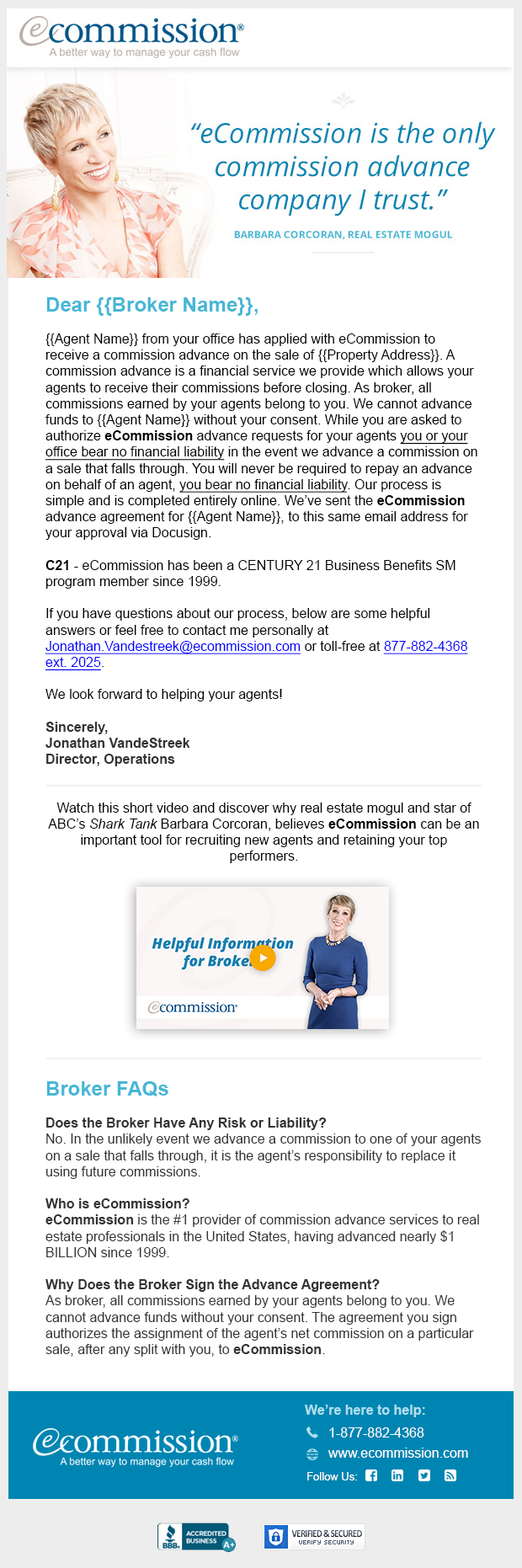
<style>
.page{position:relative;width:522px;height:1568px;background:#ffffff}
.page>*{position:absolute;margin:0}
.t1{font:13.5px "ArialMT";color:#000000}
.t2{font:20.2px "Arial-BoldMT";color:#46b7d5}
.t3{font:13.5px "Arial-BoldMT";color:#000000}
.t4{font:13.5px "ArialMT";color:#000000;text-decoration:underline}
.t5{font:13.5px "ArialMT";color:#0000ff;text-decoration:underline}
.t6{font:13.5px "Arial-BoldMT";color:#333333}
.t7{font:13.5px "Arial-ItalicMT";color:#000000}
.t8{font:13.5px "ArialMT";color:#333333}
.t9{font:13.5px "Arial-BoldMT";color:#abe0ed}
.t10{font:13.5px/20.2px "ArialMT";color:#ffffff}
.t11{font:10.9px "ArialMT";color:#ffffff}
</style>
<div class="page">
<p class="t1" style="left:45px;top:297px;width:436px;height:1060px"><span class="t2">Dear {{Broker Name}}, <br></span><br>{{Agent Name}} from your office has applied with eCommission to receive a commission advance on the sale of {{Property Address}}. A commission advance is a financial service we provide which allows your agents to receive their commissions before closing. As broker, all commissions earned by your agents belong to you. We cannot advance funds to {{Agent Name}} without your consent. While you are asked to authorize <span class="t3">eCommission</span> advance requests for your agents <span class="t4">you or your office bear no financial liability</span> in the event we advance a commission on a sale that falls through. You will never be required to repay an advance on behalf of an agent, <span class="t4">you bear no financial liability</span>. Our process is simple and is completed entirely online. We’ve sent the <span class="t3">eCommission</span> advance agreement for {{Agent Name}}, to this same email address for your approval via Docusign.<br> <br><span class="t3">C21</span> - eCommission has been a CENTURY 21 Business Benefits SM program member since 1999.<br><br>If you have questions about our process, below are some helpful answers or feel free to contact me personally at <span class="t5">Jonathan.Vandestreek@ecommission.com</span> or toll-free at <span class="t5">877-882-4368 ext. 2025</span>.<br><br>We look forward to helping your agents!<br> <br><span class="t6">Sincerely,<br>Jonathan VandeStreek<br>Director, Operations<br></span><br><br>Watch this short video and discover why real estate mogul and star of ABC’s <span class="t7">Shark Tank</span> Barbara Corcoran, believes <span class="t3">eCommission</span> can be an important tool for recruiting new agents and retaining your top performers.<br><br><br><br><br><br><br><br><br><br><br><br><br> <br><span class="t2">Broker FAQs <br> <br></span><span class="t6">Does the Broker Have Any Risk or Liability?<br></span><span class="t8">No. In the unlikely event we advance a commission to one of your agents on a sale that falls through, it is the agent’s responsibility to replace it using future commissions. <br> <br></span><span class="t6">Who is eCommission?<br>eCommission</span><span class="t8"> is the #1 provider of commission advance services to real estate professionals in the United States, having advanced nearly $1 BILLION since 1999. <br><br></span><span class="t6">Why Does the Broker Sign the Advance Agreement?<br></span><span class="t8">As broker, all commissions earned by your agents belong to you. We cannot advance funds without your consent. The agreement you sign authorizes the assignment of the agent’s net commission on a particular sale, after any split with you, to </span><span class="t6">eCommission</span><span class="t8">.<br><br></span><span class="t6">Why is this good for my agents?<br></span><span class="t8">Experience indicates that agents typically use </span><span class="t6">eCommission</span><span class="t8"> 2 to 3 times per year, whenever business expenses surpass monthly cash flow. With </span><span class="t6">eCommission</span><span class="t8"> as your partner, you can help your agents better control their cash flow keeping them focused and engaged, resulting in more listings, more sales and higher levels of productivity.</span></p>
<p class="t9" style="left:305px;top:1405px;width:120px;height:12px">We’re here to help:</p>
<p class="t10" style="left:328px;top:1427px;width:140px;height:31px">1-877-882-4368<br>www.ecommission.com</p>
<p class="t11" style="left:307px;top:1472px;width:50px;height:8px">Follow Us:</p>
</div>
